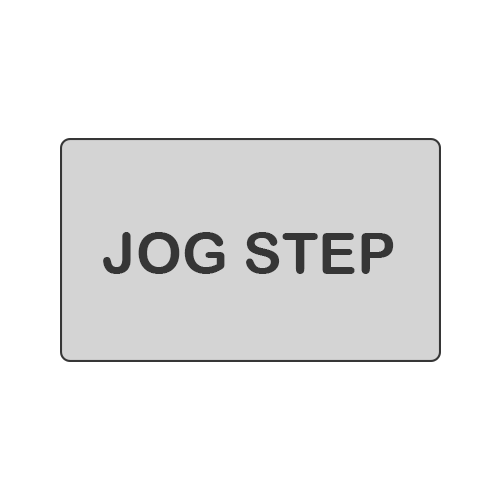
<style>
.page{position:relative;width:500px;height:500px;background:#ffffff}
.page>*{position:absolute;margin:0}
.t1{font:57.6px "ArialRoundedMTBold";color:#363636}
</style>
<div class="page">
<p class="t1" style="left:103px;top:232px;width:291px;height:42px">JOG STEP</p>
</div>
